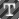
<style>
.page{position:relative;width:19px;height:19px;background:#646464}
.page>*{position:absolute;margin:0}
.t1{font:24px "CourierNewPS-BoldMT"}
</style>
<div class="page">
<p class="t1" style="left:2px;top:2px;width:14px;height:14px">T</p>
</div>
